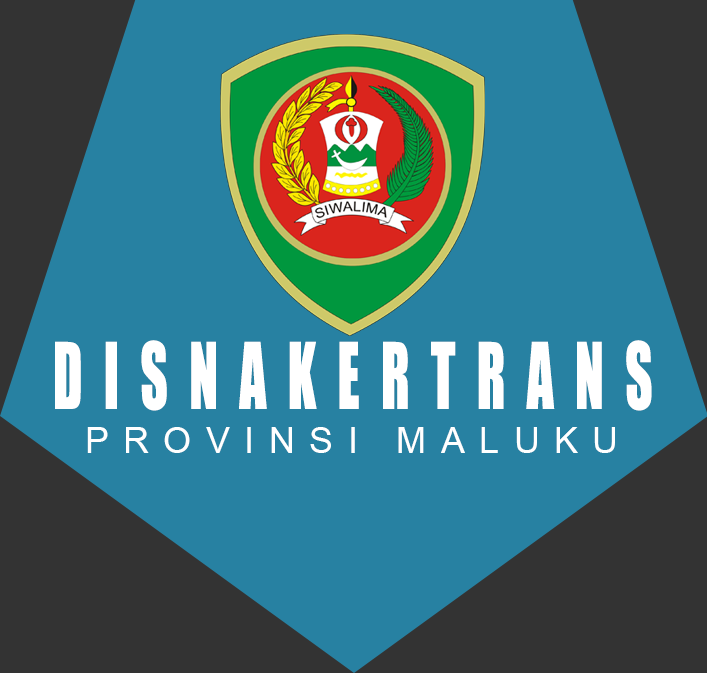
<style>
.page{position:relative;width:707px;height:673px;background:#2781a2}
.page>*{position:absolute;margin:0}
.t1{font:84.8px "Impact";letter-spacing:0.4em;color:#ffffff;scale:0.63 1}
.t2{font:36px "ArialMT";letter-spacing:0.4em;color:#ffffff}
</style>
<div class="page">
<p class="t1" style="left:55px;top:340px;width:597px;height:71px">DISNAKERTRANS</p>
<p class="t2" style="left:87px;top:427px;width:528px;height:26px">PROVINSI MALUKU</p>
</div>
